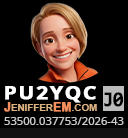
<style>
.page{position:relative;width:128px;height:138px;background:#000000}
.page>*{position:absolute;margin:0}
.t1{font:17.7px "NotoSans-Bold";letter-spacing:0.075em;color:#ffffff;font-weight:bold;scale:1.17 1}
.t2{font:9.8px "Arial-BoldMT";color:#dcb180}
.t3{font:12px "Arial-BoldMT";color:#f68e5d;font-weight:bold}
.t4{font:20.9px "Consolas-Bold";letter-spacing:-0.05em;color:#000000;font-weight:bold;scale:0.89 1}
.t5{font:10.1px "NotoSans-Regular";color:#cccccc;scale:1.11 1}
</style>
<div class="page">
<p class="t1" style="left:5px;top:86px;width:91px;height:17px">PU2YQC</p>
<p class="t2" style="left:4px;top:102px;width:93px;height:10px"><span class="t3">J</span>ENIFFER<span class="t3">EM</span>.COM</p>
<p class="t4" style="left:104px;top:92px;width:19px;height:15px">J0</p>
<p class="t5" style="left:4px;top:117px;width:120px;height:8px">53500.037753/2026-43</p>
</div>
